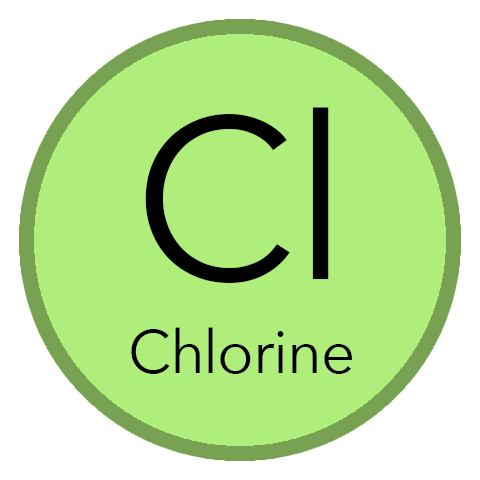
<style>
.page{position:relative;width:480px;height:480px;background:#afee7b}
.page>*{position:absolute;margin:0}
.t1{font:227.2px "AvenirNext-Regular";letter-spacing:-0.02em;color:#000000}
.t2{font:60px "AvenirNext-Regular";letter-spacing:-0.02em;color:#000000}
</style>
<div class="page">
<p class="t1" style="left:145px;top:107px;width:184px;height:176px">Cl</p>
<p class="t2" style="left:131px;top:327px;width:221px;height:47px">Chlorine</p>
</div>
